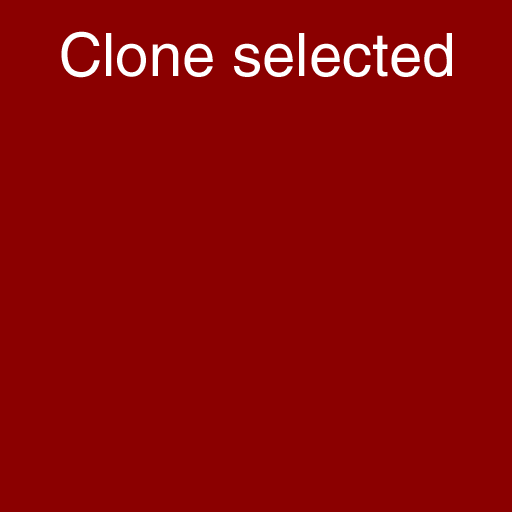
<style>
.page{position:relative;width:512px;height:512px;background:#8b0000}
.page>*{position:absolute;margin:0}
.t1{font:60px "Helvetica";color:#ffffff}
</style>
<div class="page">
<p class="t1" style="left:61px;top:31px;width:391px;height:47px">Clone selected</p>
</div>
